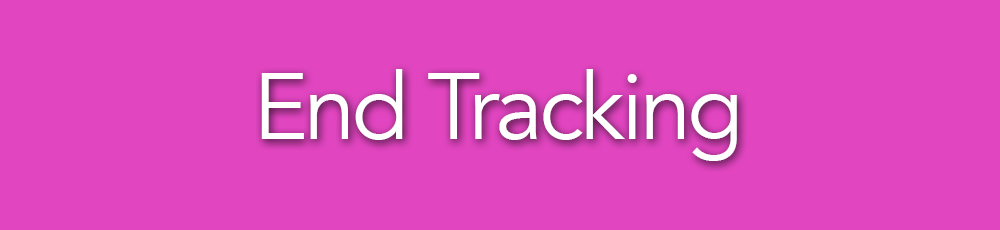
<style>
.page{position:relative;width:1000px;height:230px;background:#e145c0}
.page>*{position:absolute;margin:0}
.t1{font:92.7px "Avenir-Book";letter-spacing:-0.04em;color:#ffffff}
</style>
<div class="page">
<p class="t1" style="left:261px;top:69px;width:476px;height:92px">End Tracking</p>
</div>
